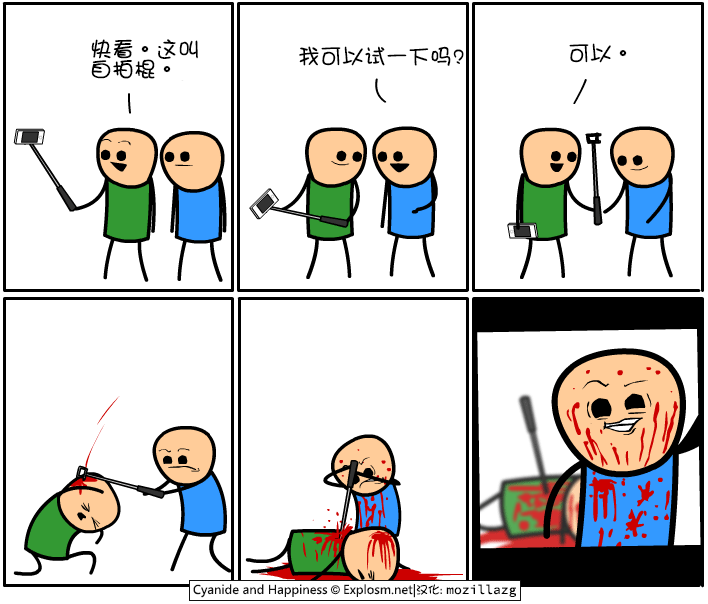
<style>
.page{position:relative;width:708px;height:604px;background:#ffffff}
.page>*{position:absolute;margin:0}
.t1{font:22px/20px "DFGirl";color:#000000}
.t2{font:22px "DFGirl";color:#000000}
</style>
<div class="page">
<p class="t1" style="left:91px;top:39px;width:107px;height:40px">快看。这叫<br>自拍棍。</p>
<p class="t2" style="left:299px;top:46px;width:165px;height:20px">我可以试一下吗?</p>
<p class="t2" style="left:569px;top:43px;width:58px;height:20px">可以。</p>
</div>
